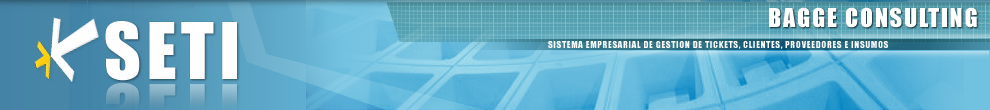
<style>
.page{position:relative;width:990px;height:110px}
.page>*{position:absolute;margin:0}
.t1{font:24px "Impact";letter-spacing:0.075em;color:#ffffff}
.t2{font:72px "Impact";letter-spacing:0.075em;color:#ffffff}
.t3{font:9px "Impact";letter-spacing:0.075em;color:#ffffff}
</style>
<div class="page">
<p class="t1" style="left:769px;top:7px;width:208px;height:21px">BAGGE CONSULTING</p>
<p class="t2" style="left:105px;top:21px;width:132px;height:60px">SETI</p>
<p class="t3" style="left:548px;top:41px;width:340px;height:8px">SISTEMA EMPRESARIAL DE GESTION DE TICKETS, CLIENTES, PROVEEDORES E INSUMOS</p>
</div>
